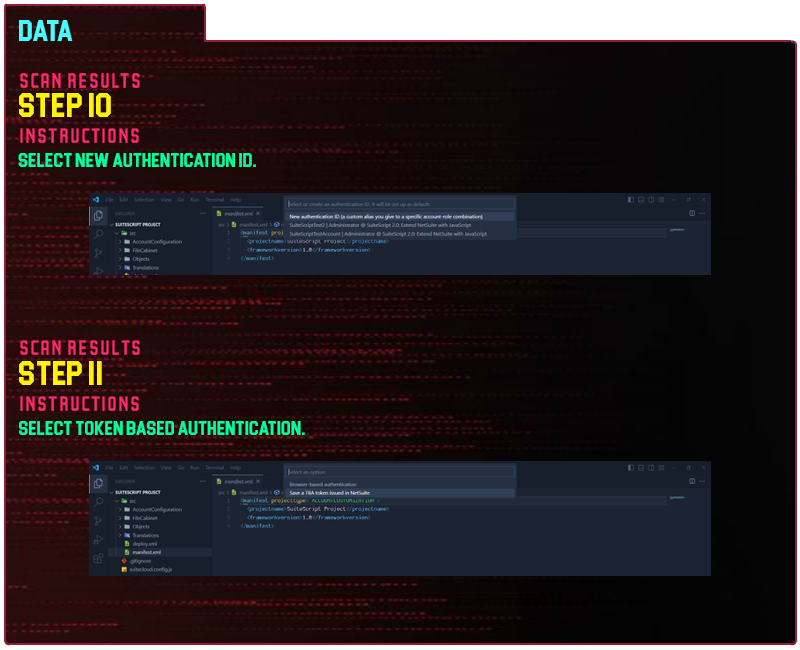
<style>
.page{position:relative;width:800px;height:650px}
.page>*{position:absolute;margin:0}
.t1{font:30px "Blockletter";color:#43ffff}
.t2{font:35px "Party-Lights-[WLM]-Flat";color:#ff296d}
.t3{font:35px "Blockletter";color:#fdf500}
.t4{font:20px "Blockletter";color:#00ff9f}
.t5{font:34.9px "Party-Lights-[WLM]-Flat";color:#ff296d}
.t6{font:34.9px "Blockletter";color:#fdf500}
.t7{font:19.9px "Blockletter";color:#00ff9f}
</style>
<div class="page">
<p class="t1" style="left:19px;top:20px;width:54px;height:21px">Data</p>
<p class="t2" style="left:20px;top:73px;width:120px;height:15px">Scan REsults</p>
<p class="t3" style="left:19px;top:93px;width:92px;height:24px">Step 10</p>
<p class="t2" style="left:20px;top:128px;width:119px;height:15px">instructions</p>
<p class="t4" style="left:18px;top:153px;width:238px;height:14px">select new authentication id.</p>
<p class="t5" style="left:20px;top:340px;width:120px;height:15px">Scan REsults</p>
<p class="t6" style="left:19px;top:361px;width:83px;height:24px">Step 11</p>
<p class="t5" style="left:20px;top:396px;width:119px;height:15px">instructions</p>
<p class="t7" style="left:19px;top:421px;width:286px;height:14px">select token based Authentication.</p>
</div>
